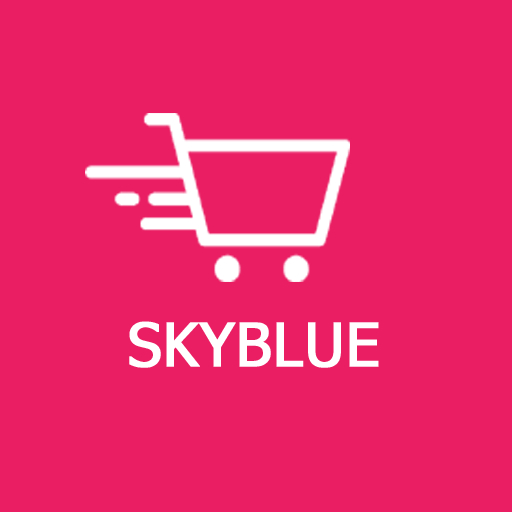
<style>
.page{position:relative;width:512px;height:512px;background:#e91e63}
.page>*{position:absolute;margin:0}
.t1{font:60px "Tahoma";color:#ffffff;font-weight:bold}
</style>
<div class="page">
<p class="t1" style="left:129px;top:321px;width:250px;height:47px">SKYBLUE</p>
</div>
